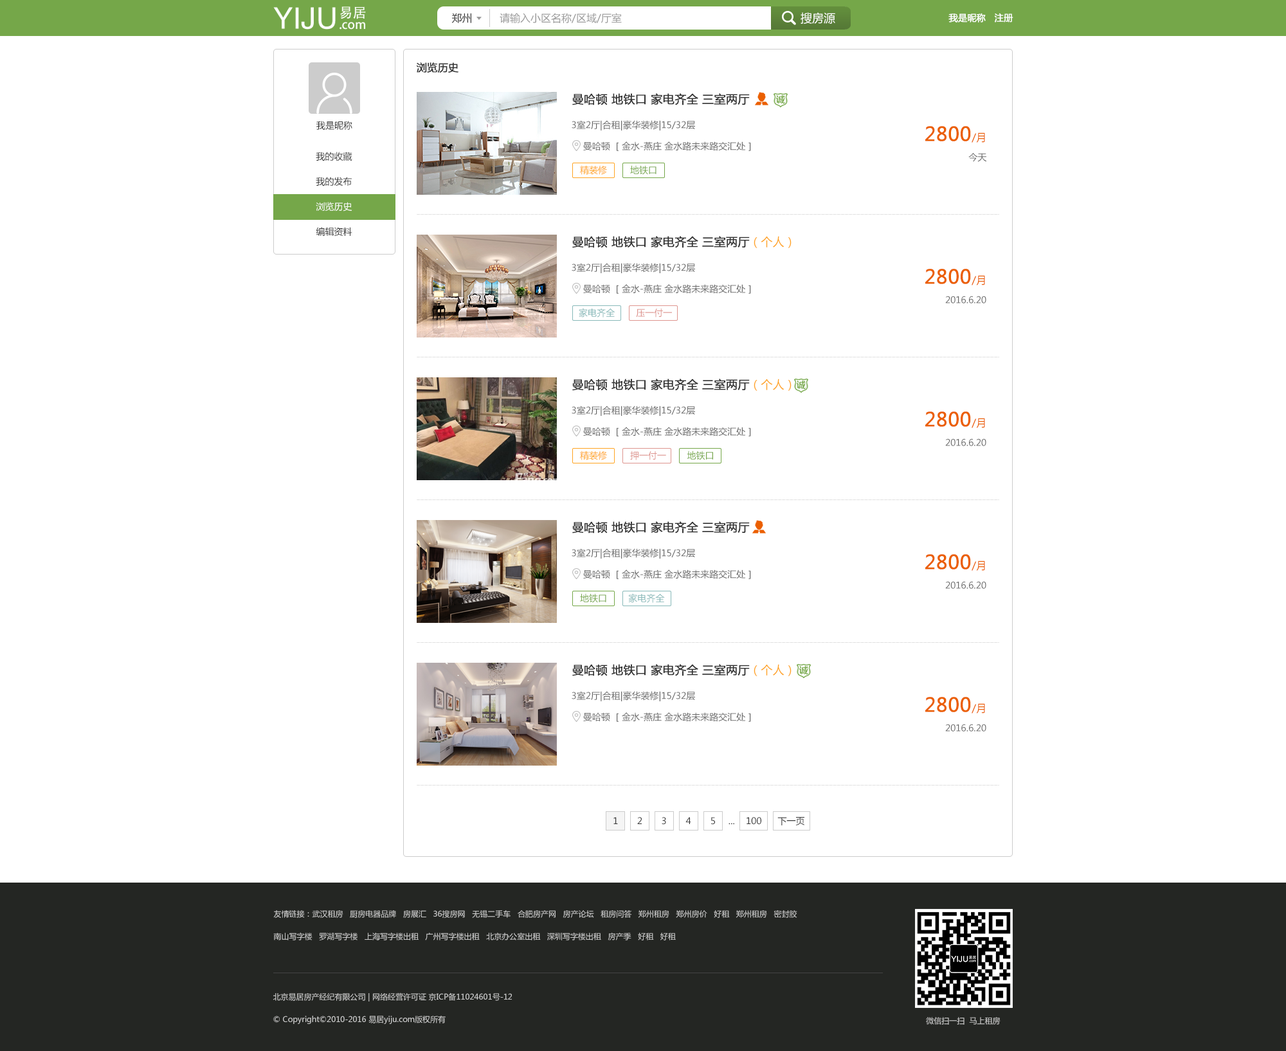
<style>
.page{position:relative;width:1286px;height:1051px;background:#ffffff}
.page>*{position:absolute;margin:0}
.t1{font:10.3px "MicrosoftYaHei";color:#999999}
.t2{font:10.3px "MicrosoftYaHei";color:#333333}
.t3{font:11.6px "MicrosoftYaHei";color:#ffffff}
.t4{font:9px "MicrosoftYaHei";color:#ffffff;font-weight:bold}
.t5{font:10.3px "MicrosoftYaHei";color:#333333;font-weight:bold}
.t6{font:11.6px "MicrosoftYaHei";color:#333333;font-weight:bold}
.t7{font:9px "MicrosoftYaHei";color:#333333}
.t8{font:9px/21.2px "MicrosoftYaHei";color:#666666}
.t9{font:19.3px/19.3px "MicrosoftYaHei";color:#eb5f00;font-weight:bold}
.t10{font:10.3px/19.3px "MicrosoftYaHei";color:#eb5f00}
.t11{font:9px/19.3px "MicrosoftYaHei";color:#666666}
.t12{font:9px/25.1px "MicrosoftYaHei";color:#333333}
.t13{font:9px/25.1px "MicrosoftYaHei";color:#ffffff}
.t14{font:9px "MicrosoftYaHei";color:#ffa422}
.t15{font:9px "MicrosoftYaHei";color:#75a749}
.t16{font:11.6px "MicrosoftYaHei";color:#ffa422}
.t17{font:9px "MicrosoftYaHei";color:#88b9b9}
.t18{font:9px "MicrosoftYaHei";color:#de958f}
.t19{font:7.7px/22.5px "MicrosoftYaHei";color:#cccccc}
.t20{font:7.7px "MicrosoftYaHei";color:#cccccc}
</style>
<div class="page">
<p class="t1" style="left:451px;top:13px;width:171px;height:10px"><span class="t2">郑州         </span>请输入小区名称/区域/厅室</p>
<p class="t3" style="left:800px;top:12px;width:35px;height:12px">搜房源</p>
<p class="t4" style="left:948px;top:13px;width:65px;height:9px">我是昵称   注册</p>
<p class="t5" style="left:416px;top:62px;width:42px;height:11px">浏览历史</p>
<p class="t6" style="left:572px;top:93px;width:178px;height:12px">曼哈顿 地铁口 家电齐全 三室两厅</p>
<p class="t7" style="left:316px;top:121px;width:36px;height:9px">我是昵称</p>
<p class="t8" style="left:572px;top:120px;width:179px;height:31px">3室2厅|合租|豪华装修|15/32层<br>     曼哈顿 ［金水-燕庄 金水路未来路交汇处］</p>
<p class="t9" style="left:925px;top:126px;width:62px;height:36px;text-align:right">2800<span class="t10">/月<br>    </span><span class="t11">今天</span></p>
<p class="t12" style="left:316px;top:152px;width:36px;height:84px">我的收藏<br>我的发布<br><span class="t13">浏览历史<br></span>编辑资料</p>
<p class="t14" style="left:580px;top:165px;width:76px;height:10px">精装修        <span class="t15">地铁口</span></p>
<p class="t6" style="left:572px;top:236px;width:219px;height:12px">曼哈顿 地铁口 家电齐全 三室两厅<span class="t16">（个人）</span></p>
<p class="t8" style="left:572px;top:263px;width:179px;height:31px">3室2厅|合租|豪华装修|15/32层<br>     曼哈顿 ［金水-燕庄 金水路未来路交汇处］</p>
<p class="t11" style="left:925px;top:269px;width:61px;height:34px;text-align:right"><span class="t9">2800</span><span class="t10">/月<br>    </span>2016.6.20</p>
<p class="t17" style="left:579px;top:308px;width:93px;height:10px">家电齐全        <span class="t18">压一付一</span></p>
<p class="t6" style="left:572px;top:379px;width:219px;height:12px">曼哈顿 地铁口 家电齐全 三室两厅<span class="t16">（个人）</span></p>
<p class="t8" style="left:572px;top:406px;width:179px;height:31px">3室2厅|合租|豪华装修|15/32层<br>     曼哈顿 ［金水-燕庄 金水路未来路交汇处］</p>
<p class="t11" style="left:925px;top:411px;width:61px;height:35px;text-align:right"><span class="t9">2800</span><span class="t10">/月<br>    </span>2016.6.20</p>
<p class="t18" style="left:580px;top:451px;width:133px;height:9px"><span class="t14">精装修        </span>押一付一        <span class="t15">地铁口</span></p>
<p class="t6" style="left:572px;top:521px;width:178px;height:13px">曼哈顿 地铁口 家电齐全 三室两厅</p>
<p class="t8" style="left:572px;top:548px;width:179px;height:31px">3室2厅|合租|豪华装修|15/32层<br>     曼哈顿 ［金水-燕庄 金水路未来路交汇处］</p>
<p class="t11" style="left:925px;top:554px;width:61px;height:35px;text-align:right"><span class="t9">2800</span><span class="t10">/月<br>    </span>2016.6.20</p>
<p class="t17" style="left:580px;top:593px;width:85px;height:10px"><span class="t15">地铁口        </span>家电齐全</p>
<p class="t6" style="left:572px;top:664px;width:219px;height:12px">曼哈顿 地铁口 家电齐全 三室两厅<span class="t16">（个人）</span></p>
<p class="t8" style="left:572px;top:691px;width:179px;height:31px">3室2厅|合租|豪华装修|15/32层<br>     曼哈顿 ［金水-燕庄 金水路未来路交汇处］</p>
<p class="t11" style="left:925px;top:697px;width:61px;height:35px;text-align:right"><span class="t9">2800</span><span class="t10">/月<br>    </span>2016.6.20</p>
<p class="t7" style="left:613px;top:817px;width:191px;height:8px">1       2       3       4       5     ...     100      下一页</p>
<p class="t19" style="left:273px;top:910px;width:524px;height:31px">友情链接：武汉租房   厨房电器品牌   房展汇   36搜房网   无锡二手车   合肥房产网   房产论坛   租房问答   郑州租房   郑州房价   好租   郑州租房   密封胶   <br>南山写字楼   罗湖写字楼   上海写字楼出租   广州写字楼出租   北京办公室出租   深圳写字楼出租   房产季   好租   好租</p>
<p class="t19" style="left:273px;top:993px;width:239px;height:31px">北京易居房产经纪有限公司 | 网络经营许可证 京ICP备11024601号-12<br>© Copyright©2010-2016 易居yiju.com版权所有</p>
<p class="t20" style="left:926px;top:1017px;width:74px;height:8px">微信扫一扫  马上租房</p>
</div>
